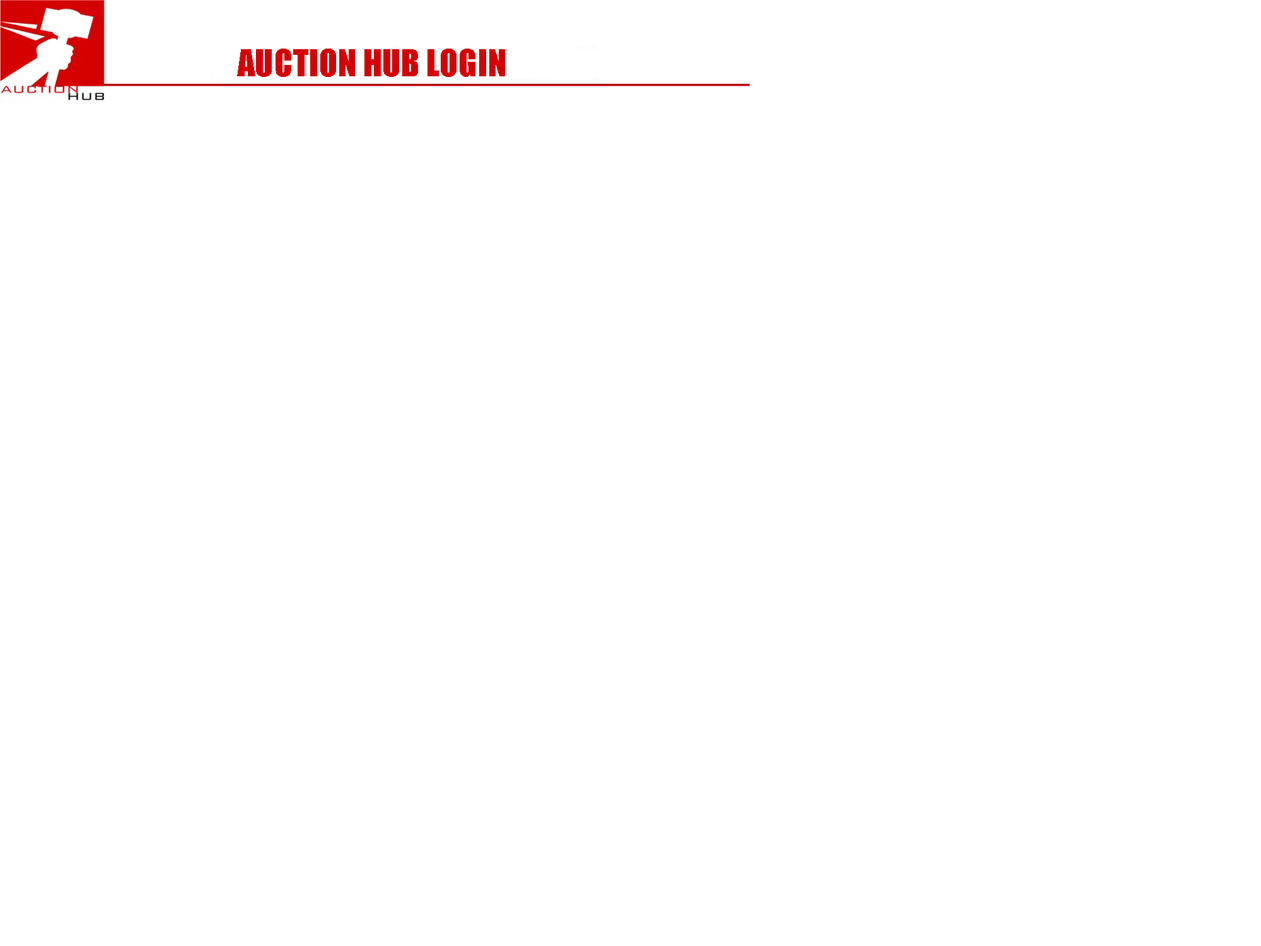
<style>
.page{position:relative;width:1261px;height:946px;background:#ffffff}
.page>*{position:absolute;margin:0}
.t1{font:34.7px "Impact";color:#d60003}
</style>
<div class="page">
<p class="t1" style="left:237px;top:49px;width:268px;height:28px">AUCTION HUB LOGIN</p>
</div>
